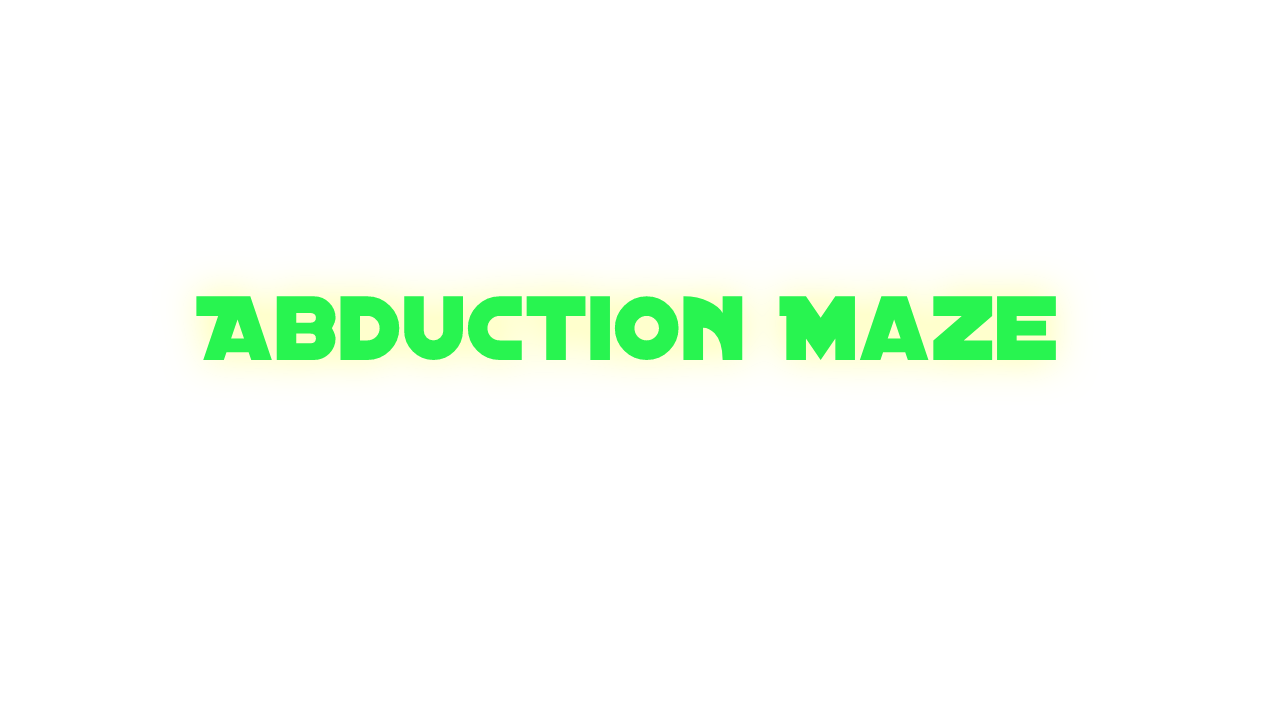
<style>
.page{position:relative;width:1280px;height:720px;background:#ffffff}
.page>*{position:absolute;margin:0}
.t1{font:98px "DistantGalaxy";color:#28f450}
</style>
<div class="page">
<p class="t1" style="left:196px;top:296px;width:860px;height:64px">Abduction Maze</p>
</div>
